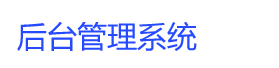
<style>
.page{position:relative;width:279px;height:68px;background:#ffffff}
.page>*{position:absolute;margin:0}
.t1{font:30px "MicrosoftYaHei";color:#264aff}
</style>
<div class="page">
<p class="t1" style="left:17px;top:21px;width:180px;height:30px">后台管理系统</p>
</div>
